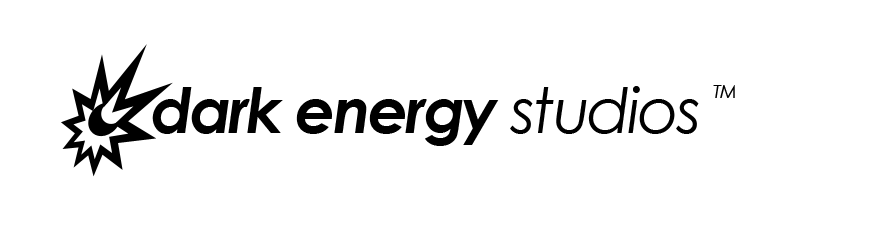
<style>
.page{position:relative;width:889px;height:239px;background:#ffffff}
.page>*{position:absolute;margin:0}
.t1{font:62.8px "CenturyGothic-BoldItalic";letter-spacing:-0.04em;color:#000000}
.t2{font:62.8px "CenturyGothic-Italic";letter-spacing:-0.04em;color:#000000}
.t3{font:17.9px "CenturyGothic-Italic";letter-spacing:-0.04em;color:#000000}
</style>
<div class="page">
<p class="t1" style="left:152px;top:85px;width:583px;height:61px">dark energy<span class="t2"> studios </span><span class="t3">TM</span></p>
</div>
